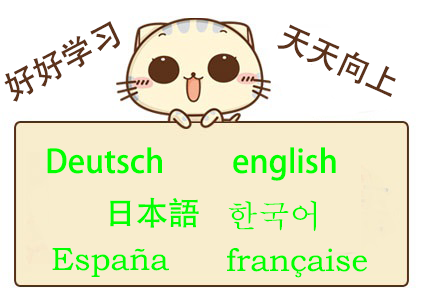
<style>
.page{position:relative;width:429px;height:300px;background:#f8edcd}
.page>*{position:absolute;margin:0}
.t1{font:32px "AdobeHeitiStd-Regular";color:#5c321a}
.t2{font:32px "AdobeHeitiStd-Regular";color:#00ff00}
.t3{font:32px "AdobeMyungjoStd-Medium";color:#00ff00}
.t4{font:32px "BookmanOldStyle";color:#00ff00}
</style>
<div class="page">
<p class="t1" style="left:4px;top:21px;width:116px;height:81px;rotate:-28deg">好好学习</p>
<p class="t1" style="left:277px;top:24px;width:119px;height:73px;rotate:24deg">天天向上</p>
<p class="t2" style="left:47px;top:147px;width:115px;height:27px">Deutsch</p>
<p class="t2" style="left:233px;top:147px;width:103px;height:34px">english</p>
<p class="t2" style="left:110px;top:197px;width:89px;height:31px">日本語</p>
<p class="t3" style="left:228px;top:200px;width:89px;height:32px">한국어</p>
<p class="t4" style="left:52px;top:248px;width:117px;height:29px">España</p>
<p class="t4" style="left:227px;top:248px;width:140px;height:30px">française</p>
</div>
